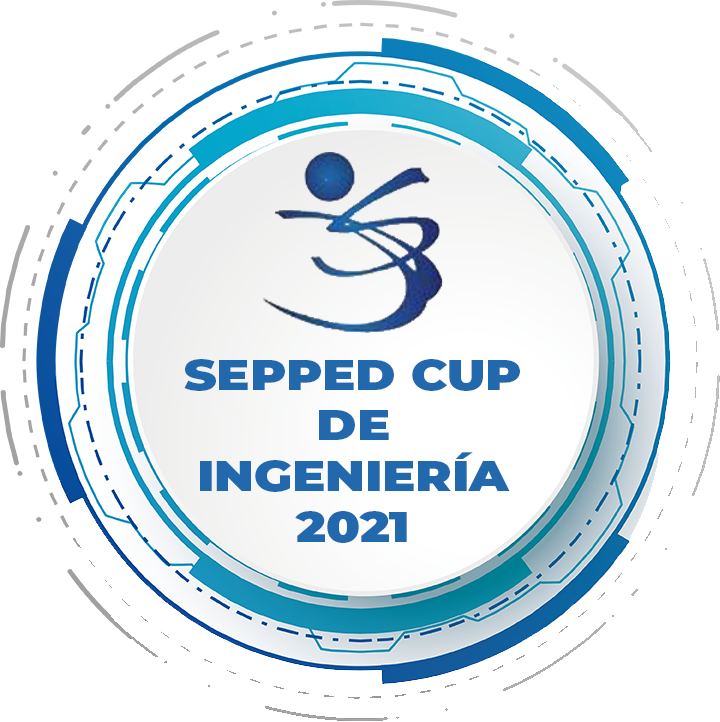
<style>
.page{position:relative;width:720px;height:722px;background:#ffffff}
.page>*{position:absolute;margin:0}
.t1{font:42.2px "Montserrat-Black";color:#2168ac;scale:1.17 1}
</style>
<div class="page">
<p class="t1" style="left:184px;top:359px;width:336px;height:184px;text-align:center">SEPPED CUP<br>DE<br>INGENIERÍA<br>2021</p>
</div>
